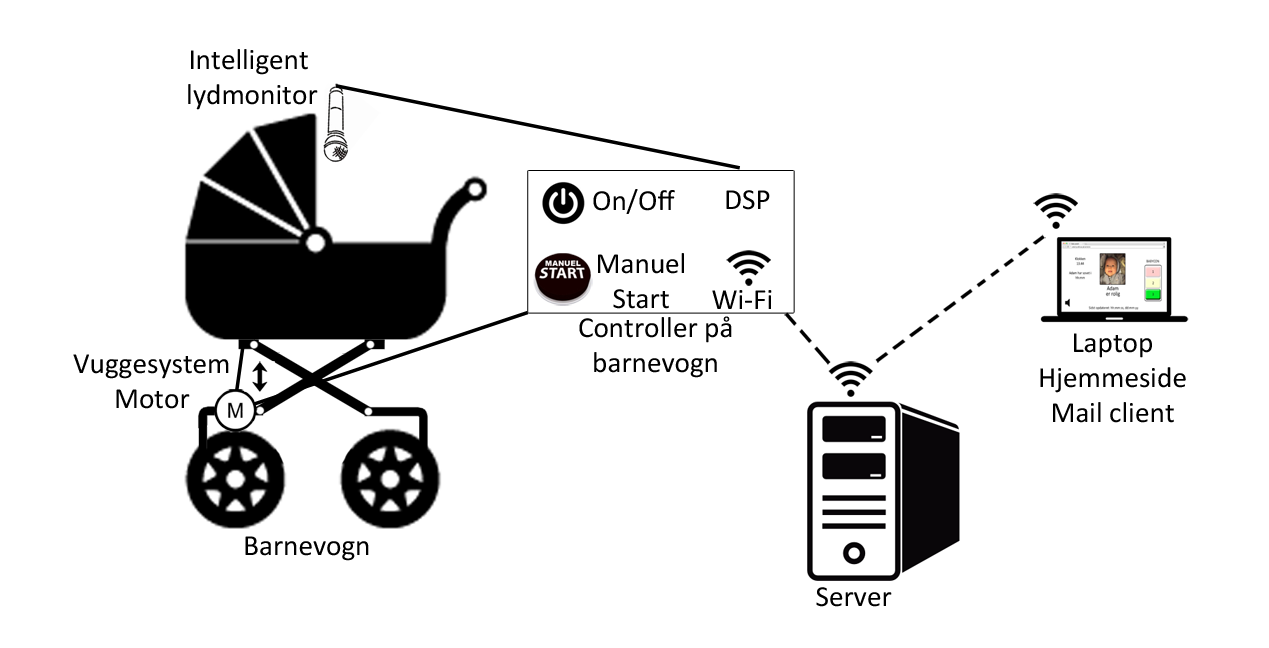
<style>
.page{position:relative;width:1269px;height:648px;background:#ffffff}
.page>*{position:absolute;margin:0}
.t1{font:29.2px "Calibri";color:#000000}
</style>
<div class="page">
<p class="t1" style="left:188px;top:49px;width:130px;height:61px;text-align:center">Intelligent <br>lydmonitor</p>
<p class="t1" style="left:593px;top:189px;width:82px;height:25px">On/Off</p>
<p class="t1" style="left:726px;top:190px;width:44px;height:20px">DSP</p>
<p class="t1" style="left:598px;top:253px;width:86px;height:56px;text-align:center">Manuel<br>Start</p>
<p class="t1" style="left:712px;top:290px;width:60px;height:19px">Wi-Fi</p>
<p class="t1" style="left:579px;top:316px;width:153px;height:62px;text-align:center">Controller på<br>barnevogn</p>
<p class="t1" style="left:1040px;top:333px;width:146px;height:90px;text-align:center">Laptop<br>Hjemmeside<br>Mail client</p>
<p class="t1" style="left:73px;top:354px;width:156px;height:55px;text-align:center">Vuggesystem<br>Motor</p>
<p class="t1" style="left:245px;top:536px;width:124px;height:25px">Barnevogn</p>
<p class="t1" style="left:816px;top:587px;width:76px;height:20px">Server</p>
</div>
